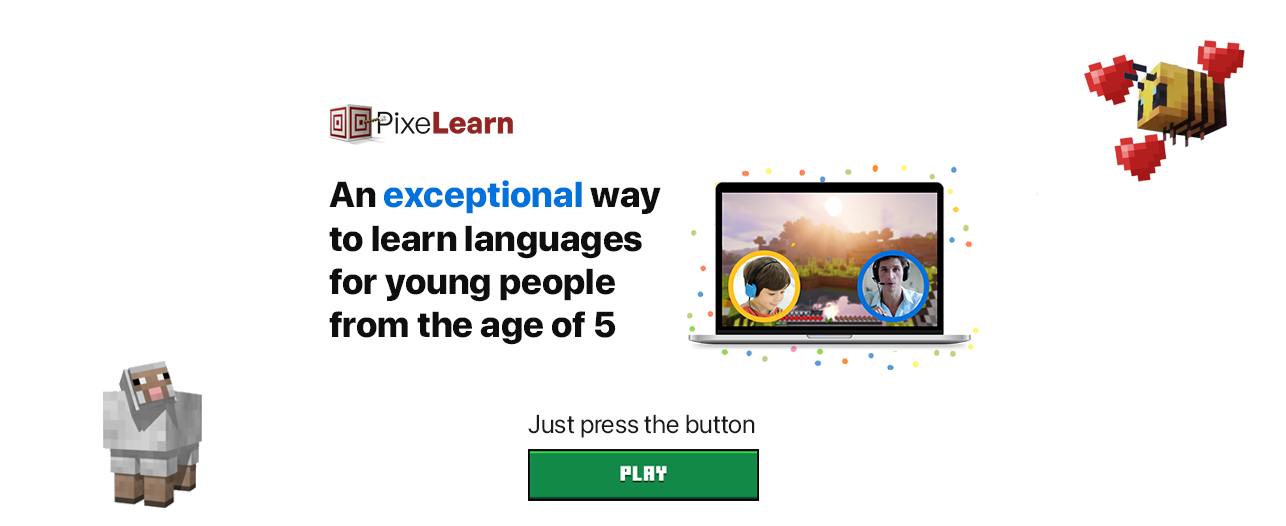
<style>
.page{position:relative;width:1286px;height:526px;background:#ffffff}
.page>*{position:absolute;margin:0}
.t1{font:36px "SFProDisplay-Heavy";color:#0e0e0e}
.t2{font:36px "SFProDisplay-Heavy";color:#0072dc}
.t3{font:26px "SFProDisplay-Regular";color:#1b1b1b}
</style>
<div class="page">
<p class="t1" style="left:329px;top:180px;width:332px;height:165px">An <span class="t2">exceptional </span>way to learn languages for young people from the age of 5</p>
<p class="t3" style="left:528px;top:414px;width:227px;height:24px">Just press the button</p>
</div>
